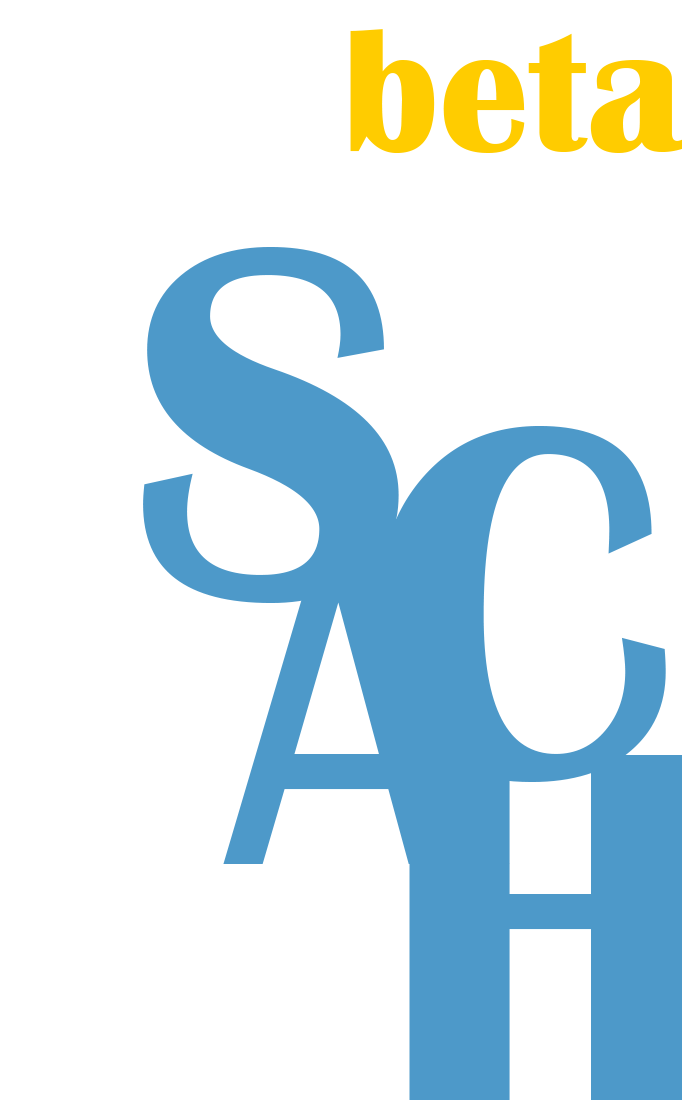
<style>
.page{position:relative;width:682px;height:1100px;background:#ffffff}
.page>*{position:absolute;margin:0}
.t1{font:517.3px "BritannicBold";color:#4d99c9}
</style>
<div class="page">
<p class="t1" style="left:143px;top:247px;width:256px;height:356px">S</p>
<p class="t1" style="left:378px;top:426px;width:288px;height:356px">C</p>
<p class="t1" style="left:223px;top:519px;width:287px;height:345px">A</p>
</div>
